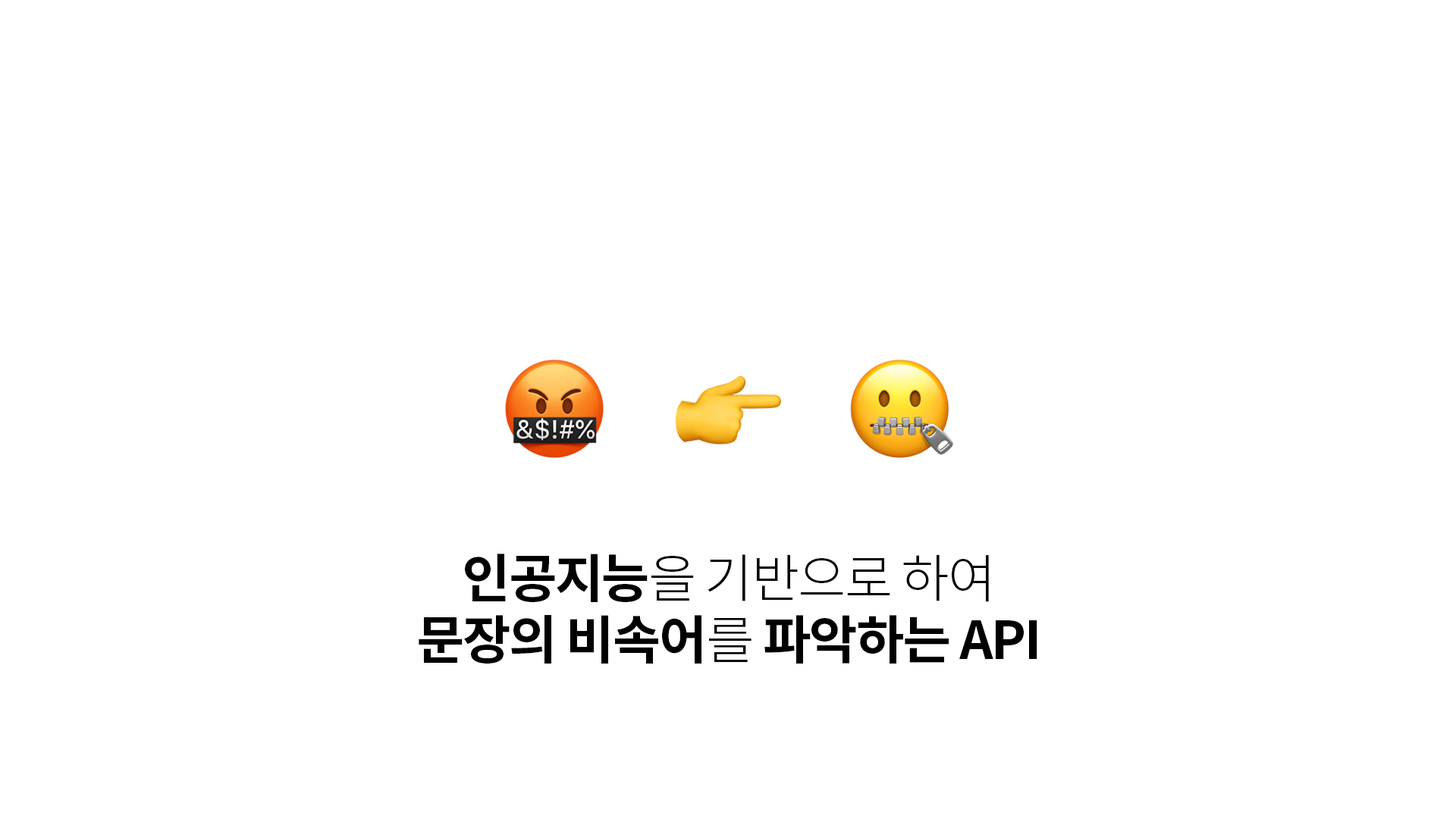
<style>
.page{position:relative;width:1456px;height:819px;background:#ffffff}
.page>*{position:absolute;margin:0}
.t1{font:52.3px/61.4px "NotoSansCJKkr-Light";letter-spacing:-0.03em;color:#000000}
.t2{font:52.3px/61.4px "NotoSansCJKkr-Bold";letter-spacing:-0.03em;color:#000000}
</style>
<div class="page">
<p class="t1" style="left:419px;top:554px;width:618px;height:110px;text-align:center"><span class="t2">인공지능</span>을 기반으로 하여<br><span class="t2">문장의 비속어</span>를<span class="t2"> 파악하는 API</span></p>
</div>
